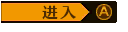
<style>
.page{position:relative;width:128px;height:32px;background:#ffffff}
.page>*{position:absolute;margin:0}
.t1{font:14.7px "FZYASHS_ZHONG--GB1-0";letter-spacing:0.125em;color:#4c2b02;scale:1.1 1}
.t2{font:14.7px "SkipStd-B";letter-spacing:0.125em;color:#4c2b02;scale:1.1 1}
</style>
<div class="page">
<p class="t1" style="left:42px;top:5px;width:34px;height:15px">进<span class="t2">入</span></p>
</div>
